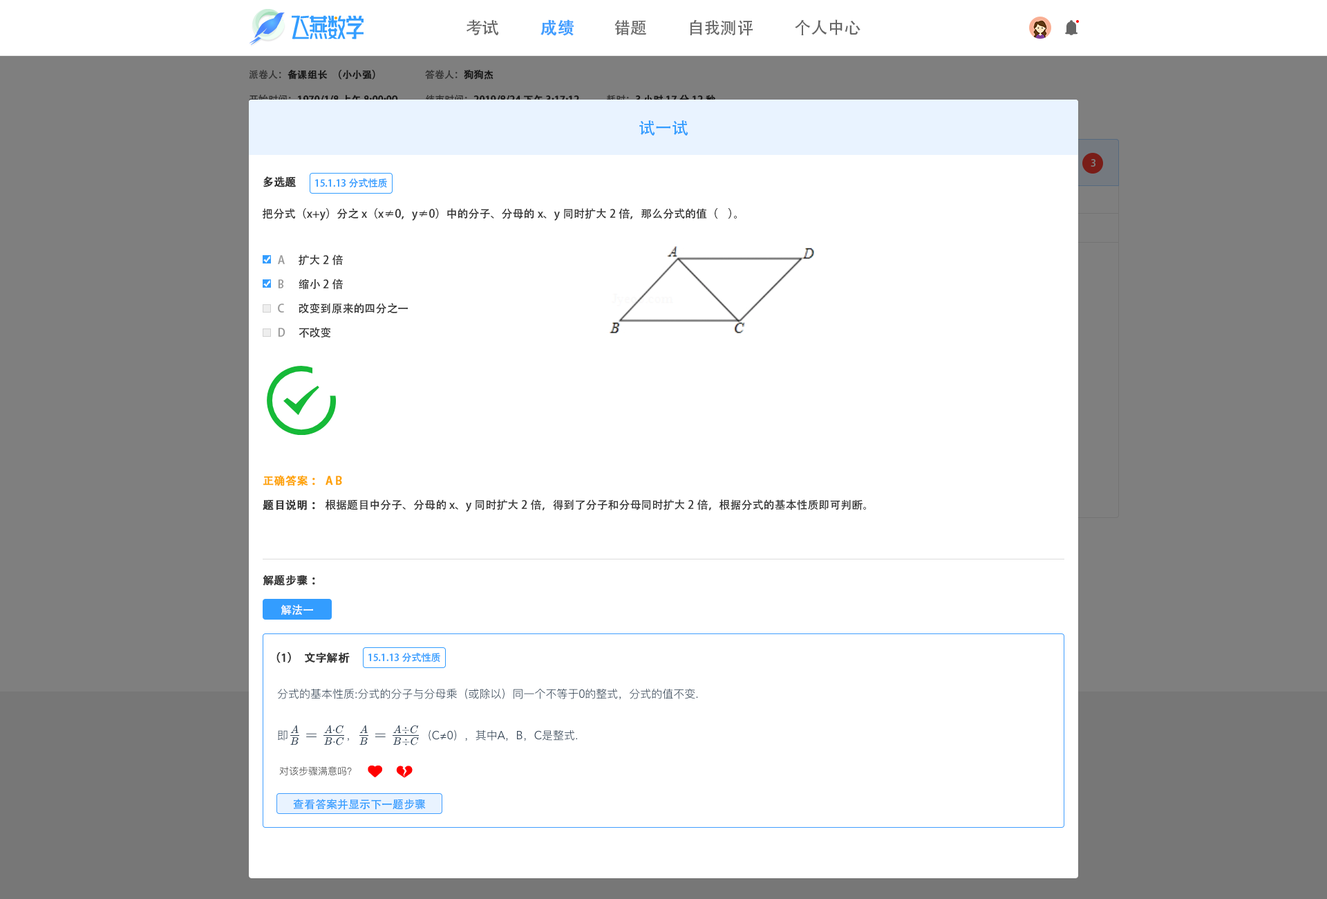
<style>
.page{position:relative;width:1327px;height:899px;background:#ffffff}
.page>*{position:absolute;margin:0}
.t1{font:16.6px "AdobeHeitiStd-Regular";color:#666666}
.t2{font:16.6px "AdobeHeitiStd-Regular";color:#409eff;font-weight:bold}
.t3{font:9.7px "AdobeHeitiStd-Regular";color:#191919;font-weight:bold}
.t4{font:9.7px "AdobeHeitiStd-Regular";color:#191919}
.t5{font:9.7px "AdobeHeitiStd-Regular"}
.t6{font:9.7px "AdobeHeitiStd-Regular";font-weight:bold}
.t7{font:16.6px "AdobeHeitiStd-Regular";color:#339dff}
.t8{font:9.7px "AdobeHeitiStd-Regular";color:#7f7f7f}
.t9{font:11.1px "AdobeHeitiStd-Regular";color:#333333;font-weight:bold}
.t10{font:9.7px "AdobeHeitiStd-Regular";color:#339dff}
.t11{font:11.1px "AdobeHeitiStd-Regular";color:#333333}
.t12{font:11.1px "AdobeHeitiStd-Regular";color:#999999}
.t13{font:11.1px "AdobeHeitiStd-Regular";color:#fea300;font-weight:bold}
.t14{font:11.1px "AdobeHeitiStd-Regular";color:#ffffff}
.t15{font:11.1px "AdobeHeitiStd-Regular";color:#339dff}
</style>
<div class="page">
<p class="t1" style="left:466px;top:19px;width:33px;height:16px">考试</p>
<p class="t2" style="left:541px;top:19px;width:33px;height:17px">成绩</p>
<p class="t1" style="left:614px;top:20px;width:32px;height:15px">错题</p>
<p class="t1" style="left:690px;top:19px;width:63px;height:17px">自我测评</p>
<p class="t1" style="left:795px;top:19px;width:66px;height:16px">个人中心</p>
<p class="t3" style="left:249px;top:70px;width:126px;height:9px"><span class="t4">派卷人：</span>备课组长（小小强）</p>
<p class="t5" style="left:425px;top:69px;width:69px;height:10px">答卷人：<span class="t6">狗狗杰</span></p>
<p class="t7" style="left:639px;top:120px;width:49px;height:15px">试一试</p>
<p class="t8" style="left:1091px;top:159px;width:5px;height:8px">3</p>
<p class="t9" style="left:263px;top:176px;width:34px;height:11px">多选题</p>
<p class="t10" style="left:315px;top:178px;width:72px;height:10px">15.1.13分式性质</p>
<p class="t11" style="left:263px;top:208px;width:474px;height:12px">把分式（x+y）分之x（x≠0，y≠0）中的分子、分母的x、y同时扩大2倍，那么分式的值（    ）。</p>
<p class="t12" style="left:278px;top:255px;width:7px;height:9px">A</p>
<p class="t11" style="left:299px;top:254px;width:44px;height:11px">扩大2倍</p>
<p class="t12" style="left:278px;top:279px;width:6px;height:9px">B</p>
<p class="t11" style="left:299px;top:279px;width:44px;height:11px">缩小2倍</p>
<p class="t12" style="left:278px;top:303px;width:6px;height:9px">C</p>
<p class="t11" style="left:299px;top:303px;width:109px;height:11px">改变到原来的四分之一</p>
<p class="t12" style="left:278px;top:328px;width:7px;height:9px">D</p>
<p class="t11" style="left:299px;top:327px;width:32px;height:11px">不改变</p>
<p class="t13" style="left:263px;top:475px;width:79px;height:11px">正确答案： A B</p>
<p class="t11" style="left:263px;top:499px;width:603px;height:12px"><span class="t9">题目说明： </span>根据题目中分子、分母的x、y同时扩大2倍，得到了分子和分母同时扩大2倍，根据分式的基本性质即可判断。</p>
<p class="t9" style="left:263px;top:574px;width:52px;height:11px">解题步骤：</p>
<p class="t14" style="left:281px;top:604px;width:32px;height:11px">解法一</p>
<p class="t9" style="left:276px;top:652px;width:74px;height:11px">（1）文字解析</p>
<p class="t10" style="left:368px;top:652px;width:72px;height:10px">15.1.13分式性质</p>
<p class="t15" style="left:293px;top:798px;width:133px;height:11px">查看答案并显示下一题步骤</p>
</div>
